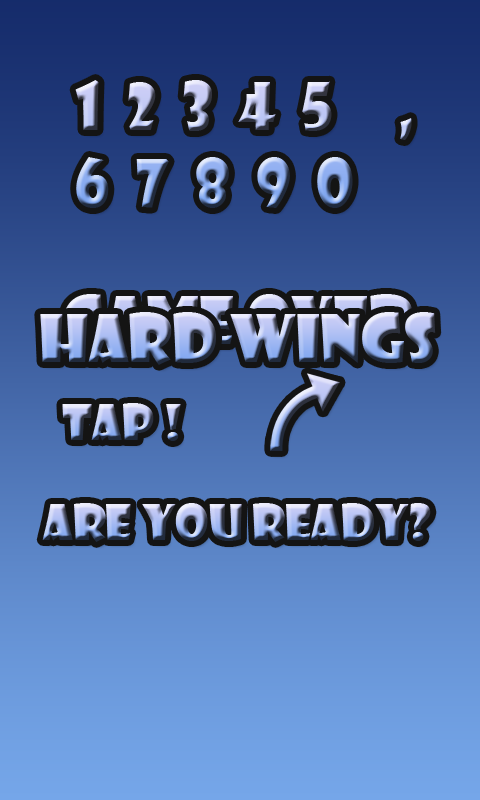
<style>
.page{position:relative;width:480px;height:800px}
.page>*{position:absolute;margin:0}
.t1{font:64px "ShowcardGothic-Reg"}
.t2{font:48px "ShowcardGothic-Reg"}
</style>
<div class="page">
<p class="t1" style="left:75px;top:80px;width:337px;height:128px">1  2  3  4  5     ,<br>6  7  8  9  0</p>
<p class="t1" style="left:40px;top:312px;width:396px;height:53px">hard wings</p>
<p class="t2" style="left:62px;top:403px;width:119px;height:38px">tap !</p>
<p class="t2" style="left:42px;top:503px;width:389px;height:39px">are you ready?</p>
</div>
